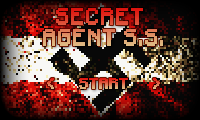
<style>
.page{position:relative;width:200px;height:120px}
.page>*{position:absolute;margin:0}
.t1{font:18px "Minecraftia-Regular";font-weight:bold}
.t2{font:12px "Minecraftia-Regular";font-weight:bold}
</style>
<div class="page">
<p class="t1" style="left:43px;top:8px;width:120px;height:38px;text-align:center">SECRET <br>AGENT S.S.</p>
<p class="t2" style="left:47px;top:78px;width:7px;height:11px">&lt;</p>
<p class="t2" style="left:79px;top:78px;width:49px;height:11px">START</p>
<p class="t2" style="left:153px;top:78px;width:7px;height:11px">&gt;</p>
</div>
